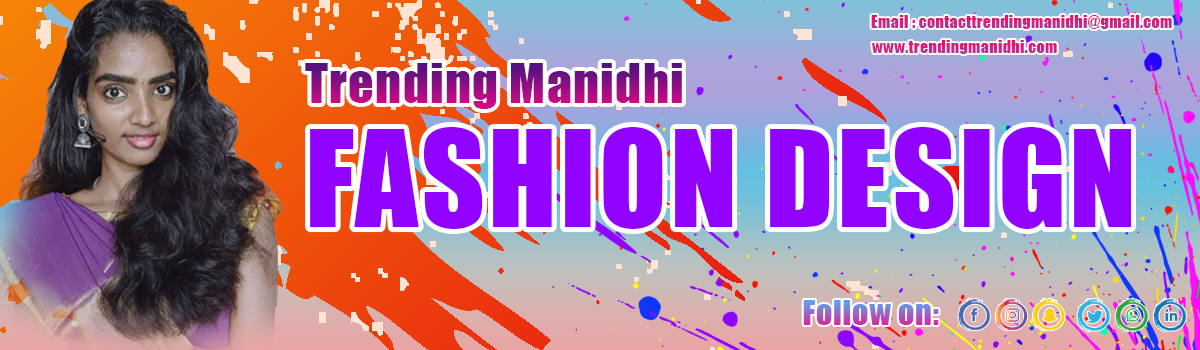
<style>
.page{position:relative;width:1200px;height:350px}
.page>*{position:absolute;margin:0}
.t1{font:15.9px "Impact";letter-spacing:0.025em;color:#d22083}
.t2{font:50px "Impact";letter-spacing:0.025em}
.t3{font:124.1px "Impact";letter-spacing:0.025em;color:#9103fe}
.t4{font:32px "Impact";letter-spacing:0.025em}
</style>
<div class="page">
<p class="t1" style="left:871px;top:15px;width:301px;height:14px">Email : contacttrendingmanidhi@gmail.com</p>
<p class="t1" style="left:872px;top:40px;width:185px;height:14px">www.trendingmanidhi.com</p>
<p class="t2" style="left:305px;top:63px;width:377px;height:46px">Trending Manidhi</p>
<p class="t3" style="left:310px;top:127px;width:821px;height:102px">FASHION DESIGN</p>
<p class="t4" style="left:803px;top:300px;width:136px;height:25px">Follow on:</p>
</div>
